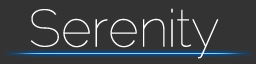
<style>
.page{position:relative;width:256px;height:64px;background:#333333}
.page>*{position:absolute;margin:0}
.t1{font:52.5px "Raleway-Thin";color:#ffffff}
</style>
<div class="page">
<p class="t1" style="left:30px;top:8px;width:189px;height:51px">Serenity</p>
</div>
